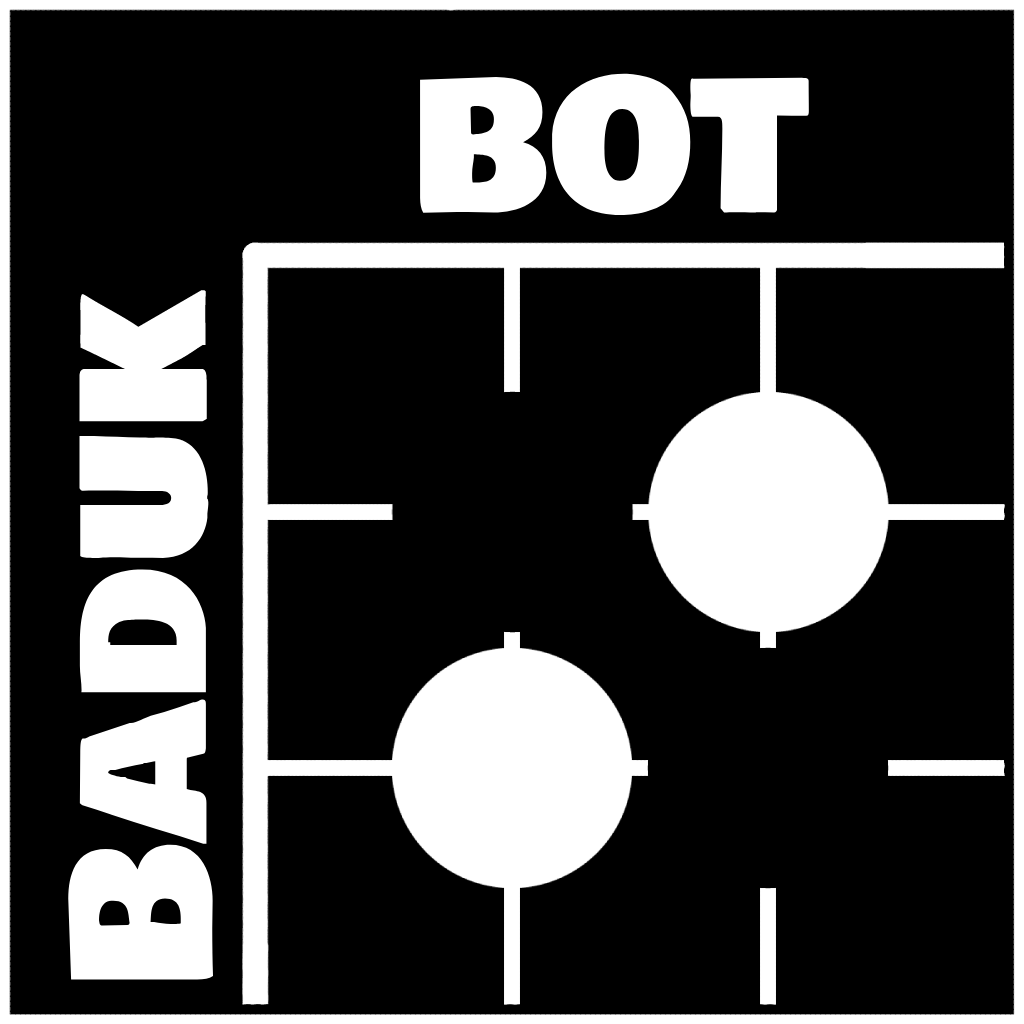
<style>
.page{position:relative;width:1024px;height:1024px;background:#000000}
.page>*{position:absolute;margin:0}
.t1{font:180px "BowlbyOneSC-Regular";color:#ffffff}
.t2{font:192px "BowlbyOneSC-Regular";color:#ffffff}
</style>
<div class="page">
<p class="t1" style="left:420px;top:73px;width:389px;height:142px">BOT</p>
<p class="t2" style="left:68px;top:289px;width:145px;height:691px;rotate:-90deg">Baduk</p>
</div>
